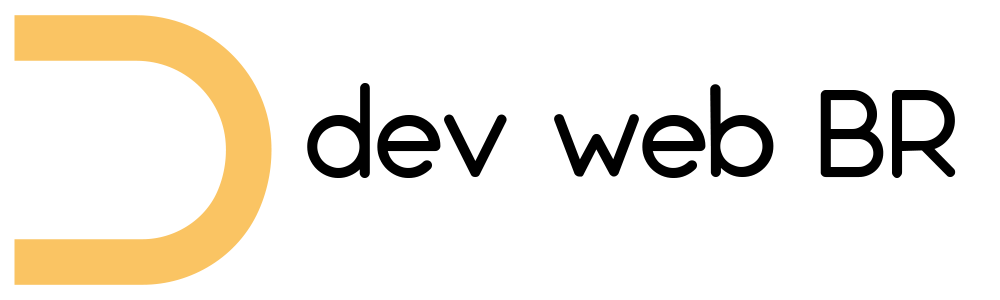
<style>
.page{position:relative;width:1000px;height:300px;background:#ffffff}
.page>*{position:absolute;margin:0}
.t1{font:124.9px "FS-Nokio-Medium";letter-spacing:-0.04em;color:#000000}
</style>
<div class="page">
<p class="t1" style="left:307px;top:83px;width:649px;height:95px">dev web BR</p>
</div>
